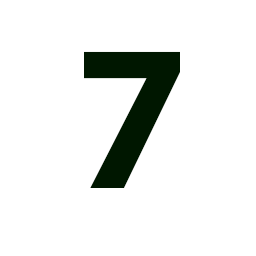
<style>
.page{position:relative;width:256px;height:256px;background:#ffffff}
.page>*{position:absolute;margin:0}
.t1{font:209.3px "MyriadPro-Bold";letter-spacing:0.02em;color:#001700}
</style>
<div class="page">
<p class="t1" style="left:84px;top:51px;width:96px;height:137px">7</p>
</div>
